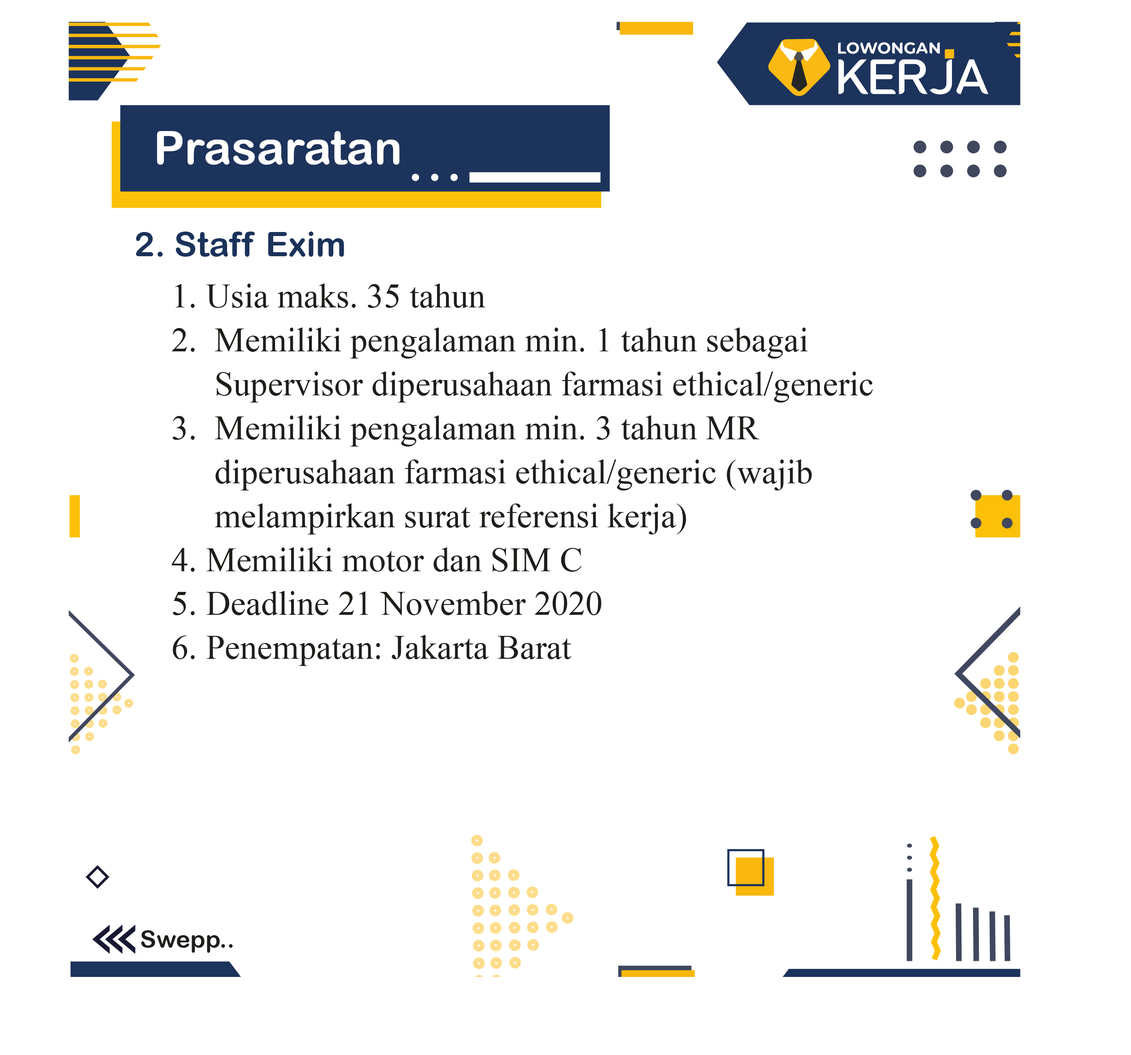
<style>
.page{position:relative;width:1131px;height:1055px;background:#ffffff}
.page>*{position:absolute;margin:0}
.t1{font:46.5px "ArialRoundedMTBold";color:#ffffff}
.t2{font:34.3px "ArialRoundedMTBold";color:#1c335b}
.t3{font:34.3px/43.9px "MyriadPro-Regular";color:#1d1d1b}
.t4{font:24.4px "ArialRoundedMTBold";color:#1d1d1b}
</style>
<div class="page">
<p class="t1" style="left:157px;top:131px;width:243px;height:34px">Prasaratan</p>
<p class="t2" style="left:136px;top:231px;width:208px;height:26px">2. Staff Exim</p>
<p class="t3" style="left:172px;top:283px;width:701px;height:383px">1. Usia maks. 35 tahun<br>2.  Memiliki pengalaman min. 1 tahun sebagai<br>     Supervisor diperusahaan farmasi ethical/generic<br>3.  Memiliki pengalaman min. 3 tahun MR<br>     diperusahaan farmasi ethical/generic (wajib<br>     melampirkan surat referensi kerja)<br>4. Memiliki motor dan SIM C<br>5. Deadline 21 November 2020<br>6. Penempatan: Jakarta Barat</p>
<p class="t4" style="left:141px;top:930px;width:92px;height:22px">Swepp..</p>
</div>
